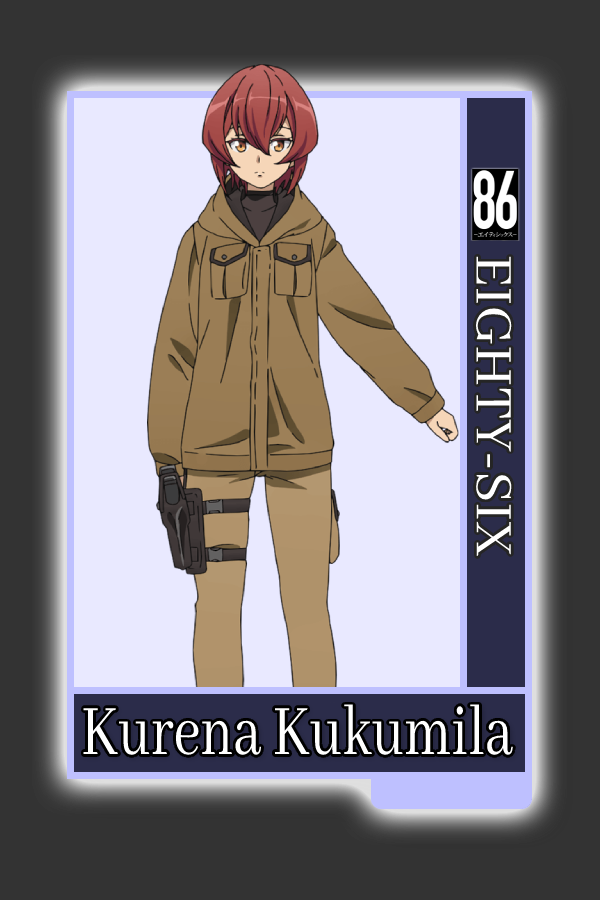
<style>
.page{position:relative;width:600px;height:900px;background:#e9e9ff}
.page>*{position:absolute;margin:0}
.t1{font:58.2px "AbhayaLibre-Regular";color:#ffffff}
.t2{font:78.1px "AbhayaLibre-Regular";color:#ffffff;scale:0.76 1}
</style>
<div class="page">
<p class="t1" style="left:476px;top:256px;width:36px;height:300px;rotate:90deg">EIGHTY-SIX</p>
<p class="t2" style="left:83px;top:704px;width:430px;height:51px">Kurena Kukumila</p>
</div>
